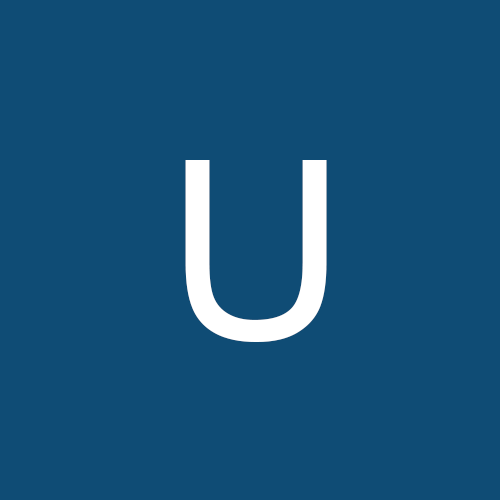
<style>
.page{position:relative;width:500px;height:500px;background:#0f4c75}
.page>*{position:absolute;margin:0}
.t1{font:250px "ArialMT";color:#ffffff}
</style>
<div class="page">
<p class="t1" style="left:185px;top:160px;width:142px;height:182px">U</p>
</div>
